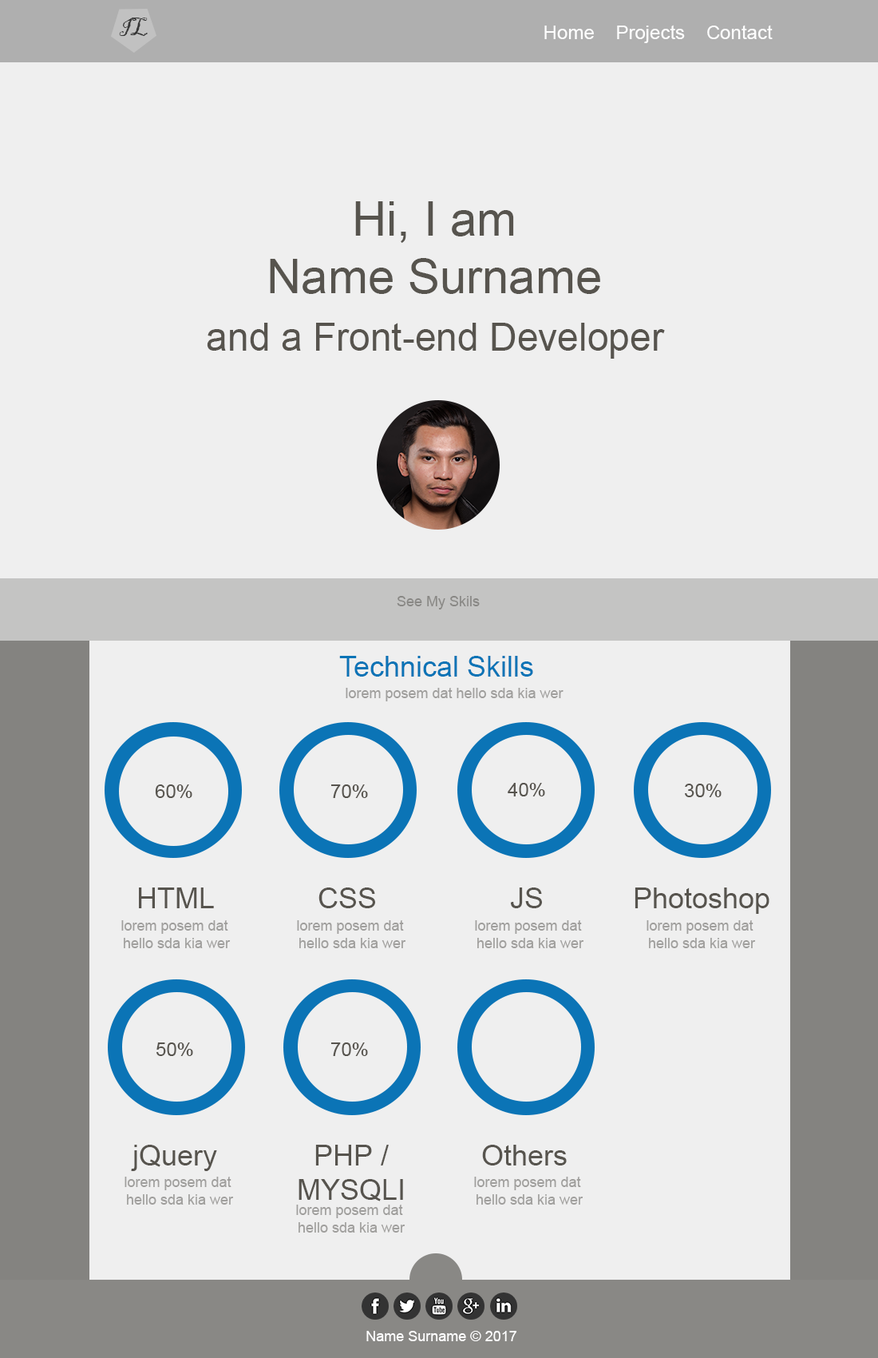
<style>
.page{position:relative;width:878px;height:1358px;background:#efefef}
.page>*{position:absolute;margin:0}
.t1{font:24px "BlackadderITC-Regular";color:#373737}
.t2{font:19.2px "ArialMT";color:#fefefe}
.t3{font:47.9px "ArialMT";color:#57544e}
.t4{font:38.3px "ArialMT";color:#57544e}
.t5{font:14.4px "ArialMT";color:#898885}
.t6{font:28.7px "ArialMT";color:#0b74b6}
.t7{font:14.4px "ArialMT";color:#a09f9d}
.t8{font:19.2px "ArialMT";color:#57544e}
.t9{font:28.7px "ArialMT";color:#57544e}
.t10{font:14.4px "ArialMT";color:#ffffff}
</style>
<div class="page">
<p class="t1" style="left:119px;top:18px;width:29px;height:18px">IL</p>
<p class="t2" style="left:545px;top:25px;width:228px;height:18px">Home    Projects    Contact</p>
<p class="t3" style="left:270px;top:201px;width:331px;height:93px;text-align:center">Hi, I am<br>Name Surname</p>
<p class="t4" style="left:207px;top:323px;width:458px;height:36px">and a Front-end Developer</p>
<p class="t5" style="left:397px;top:596px;width:83px;height:13px">See My Skils</p>
<p class="t6" style="left:339px;top:656px;width:194px;height:20px">Technical Skills</p>
<p class="t7" style="left:346px;top:688px;width:218px;height:13px">lorem posem dat hello sda kia wer</p>
<p class="t8" style="left:155px;top:784px;width:37px;height:14px">60%</p>
<p class="t8" style="left:331px;top:784px;width:37px;height:14px">70%</p>
<p class="t8" style="left:508px;top:783px;width:37px;height:13px">40%</p>
<p class="t8" style="left:685px;top:783px;width:37px;height:14px">30%</p>
<p class="t9" style="left:139px;top:887px;width:75px;height:21px">HTML</p>
<p class="t9" style="left:319px;top:887px;width:56px;height:21px">CSS</p>
<p class="t9" style="left:510px;top:887px;width:32px;height:21px">JS</p>
<p class="t9" style="left:635px;top:887px;width:135px;height:27px">Photoshop</p>
<p class="t7" style="left:121px;top:920px;width:110px;height:28px;text-align:center">lorem posem dat <br>hello sda kia wer</p>
<p class="t7" style="left:297px;top:920px;width:109px;height:28px;text-align:center">lorem posem dat <br>hello sda kia wer</p>
<p class="t7" style="left:475px;top:920px;width:110px;height:28px;text-align:center">lorem posem dat <br>hello sda kia wer</p>
<p class="t7" style="left:647px;top:920px;width:109px;height:28px;text-align:center">lorem posem dat <br>hello sda kia wer</p>
<p class="t8" style="left:157px;top:1042px;width:36px;height:14px">50%</p>
<p class="t8" style="left:331px;top:1042px;width:37px;height:14px">70%</p>
<p class="t9" style="left:131px;top:1144px;width:86px;height:27px">jQuery</p>
<p class="t9" style="left:299px;top:1144px;width:104px;height:57px;text-align:center">PHP /<br>MYSQLI</p>
<p class="t9" style="left:482px;top:1144px;width:85px;height:21px">Others</p>
<p class="t7" style="left:125px;top:1176px;width:109px;height:28px;text-align:center">lorem posem dat <br>hello sda kia wer</p>
<p class="t7" style="left:474px;top:1176px;width:110px;height:28px;text-align:center">lorem posem dat <br>hello sda kia wer</p>
<p class="t7" style="left:296px;top:1204px;width:110px;height:28px;text-align:center">lorem posem dat <br>hello sda kia wer</p>
<p class="t10" style="left:367px;top:1330px;width:150px;height:11px">Name Surname © 2017</p>
</div>
